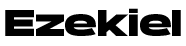
<style>
.page{position:relative;width:186px;height:46px;background:#ffffff}
.page>*{position:absolute;margin:0}
.t1{font:37px "HansonBold";color:#000000}
</style>
<div class="page">
<p class="t1" style="left:5px;top:8px;width:176px;height:28px">Ezekiel</p>
</div>
